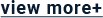
<style>
.page{position:relative;width:103px;height:18px;background:#ffffff}
.page>*{position:absolute;margin:0}
.t1{font:18px "Roboto-Bold";letter-spacing:0.05em;color:#091b2f;text-decoration:underline}
</style>
<div class="page">
<p class="t1" style="left:0px;top:0px;width:103px;height:18px">view more+</p>
</div>
